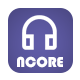
<style>
.page{position:relative;width:80px;height:80px;background:#ffffff}
.page>*{position:absolute;margin:0}
.t1{font:15px "Bauhaus93";color:#ffffff}
</style>
<div class="page">
<p class="t1" style="left:17px;top:56px;width:46px;height:12px">NCORE</p>
</div>
